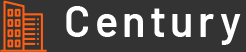
<style>
.page{position:relative;width:246px;height:52px;background:#333333}
.page>*{position:absolute;margin:0}
.t1{font:43.2px "Barlow-SemiBold";letter-spacing:0.1em;color:#ffffff}
</style>
<div class="page">
<p class="t1" style="left:66px;top:6px;width:175px;height:39px">Century</p>
</div>
